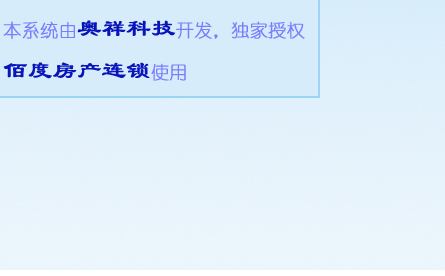
<style>
.page{position:relative;width:445px;height:276px;background:#d6ecfa}
.page>*{position:absolute;margin:0}
.t1{font:18px "YouYuan";color:#797ffc;font-weight:bold}
.t2{font:24px "LiSu";color:#0915bb;font-weight:bold}
</style>
<div class="page">
<p class="t1" style="left:3px;top:20px;width:302px;height:61px">本系统由<span class="t2">奥祥科技</span>开发，独家授权<br><span class="t2">佰度房产连锁</span>使用</p>
</div>
